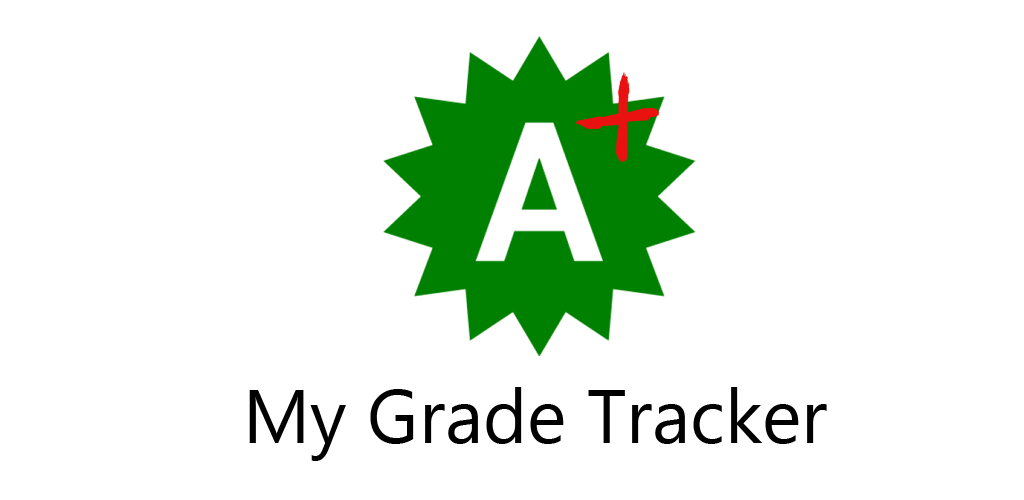
<style>
.page{position:relative;width:1024px;height:500px;background:#ffffff}
.page>*{position:absolute;margin:0}
.t1{font:75px "KhmerUI";color:#000000}
</style>
<div class="page">
<p class="t1" style="left:249px;top:387px;width:578px;height:74px">My Grade Tracker</p>
</div>
